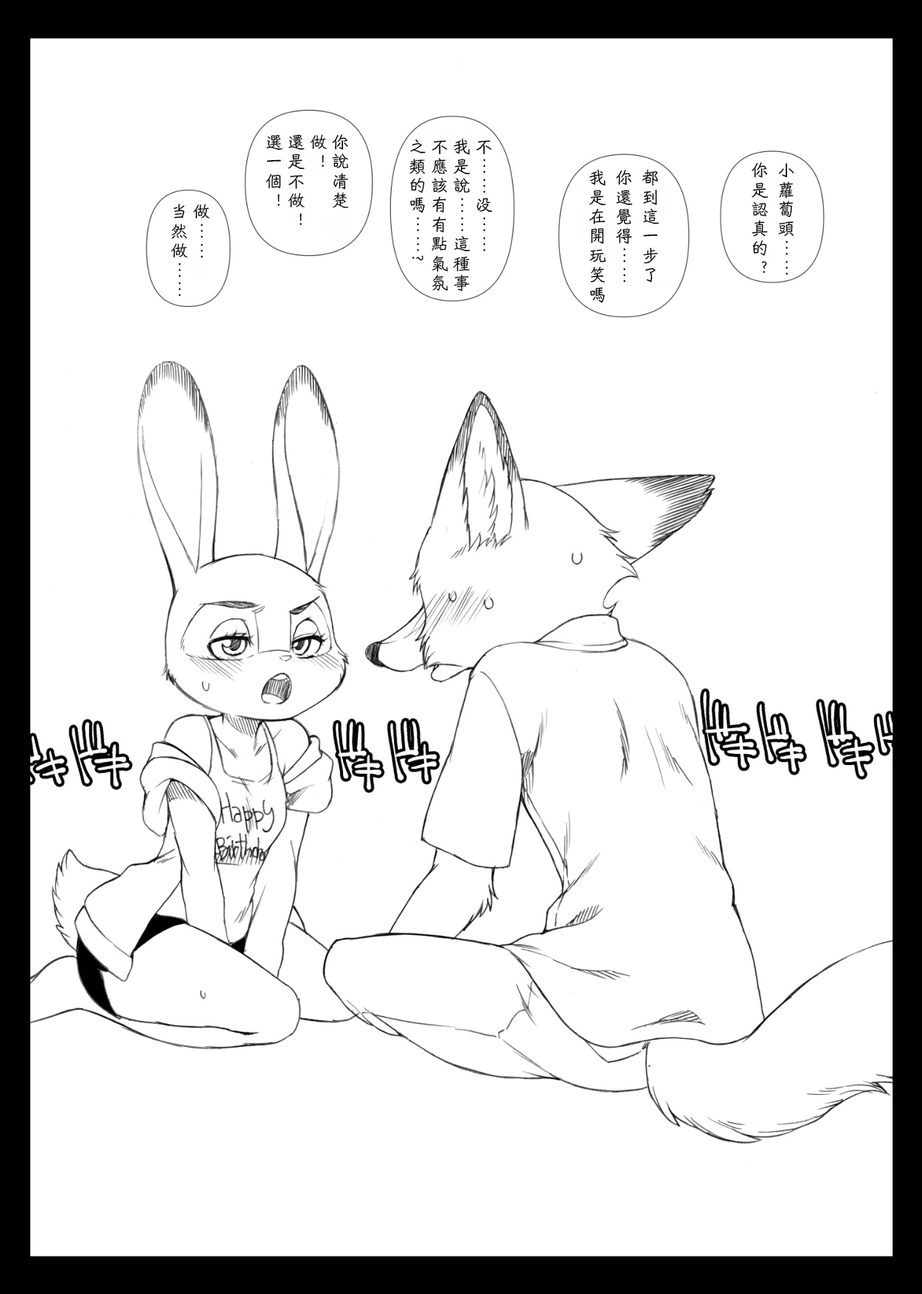
<style>
.page{position:relative;width:922px;height:1294px;background:#ffffff}
.page>*{position:absolute;margin:0}
.t1{font:17.7px/22.1px "HYShiWei55U";letter-spacing:0.1em;color:#000000}
.t2{font:17.7px/26.5px "HYShiWei55U";letter-spacing:0.1em;color:#000000}
</style>
<div class="page">
<p class="t1" style="left:265px;top:134px;width:84px;height:92px">你說清楚<br>做！<br>還是不做！<br>選一個！</p>
<p class="t1" style="left:409px;top:138px;width:84px;height:153px">不……没……<br>我是說……這種事<br>不應該有有點氣氛<br>之類的嗎……?</p>
<p class="t2" style="left:589px;top:169px;width:70px;height:134px">都到這一步了<br>你還覺得……<br>我是在開玩笑嗎</p>
<p class="t2" style="left:751px;top:162px;width:43px;height:113px">小蘿蔔頭……<br>你是認真的？</p>
<p class="t1" style="left:171px;top:204px;width:39px;height:92px">做……<br>当然做……</p>
</div>
